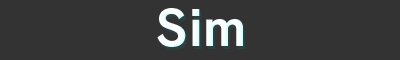
<style>
.page{position:relative;width:400px;height:60px;background:#333333}
.page>*{position:absolute;margin:0}
.t1{font:48px "RodinPro-B";color:#fefefe}
</style>
<div class="page">
<p class="t1" style="left:157px;top:8px;width:86px;height:39px">Sim</p>
</div>
